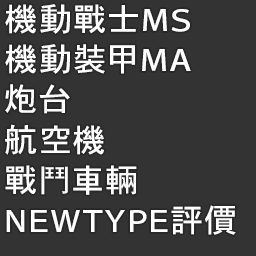
<style>
.page{position:relative;width:256px;height:256px;background:#333333}
.page>*{position:absolute;margin:0}
.t1{font:32px "HeiseiKakuGoStd-W5";letter-spacing:0.06em;color:#ffffff;scale:1.04 1}
.t2{font:32px "HeiseiKakuGoStd-W5";letter-spacing:0.06em;color:#ffffff}
</style>
<div class="page">
<p class="t1" style="left:5px;top:4px;width:185px;height:30px">機動戰士MS</p>
<p class="t1" style="left:5px;top:44px;width:186px;height:30px">機動裝甲MA</p>
<p class="t1" style="left:5px;top:84px;width:65px;height:30px">炮台</p>
<p class="t1" style="left:5px;top:124px;width:99px;height:31px">航空機</p>
<p class="t1" style="left:5px;top:165px;width:132px;height:30px">戰鬥車輛</p>
<p class="t2" style="left:6px;top:205px;width:230px;height:30px">NEWTYPE<span class="t1">評價</span></p>
</div>
